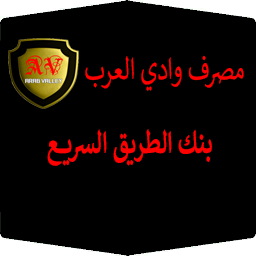
<style>
.page{position:relative;width:256px;height:256px;background:#000000}
.page>*{position:absolute;margin:0}
.t1{font:36.3px "Calibri";color:#fe0000;scale:0.7 1}
.t2{font:36.3px "Calibri-Bold";color:#fe0000;scale:0.7 1}
</style>
<div class="page">
<p class="t1" style="left:85px;top:55px;width:159px;height:36px">مصرف وادي العرب</p>
<p class="t2" style="left:47px;top:129px;width:165px;height:37px">بنك الطريق السريع</p>
</div>
